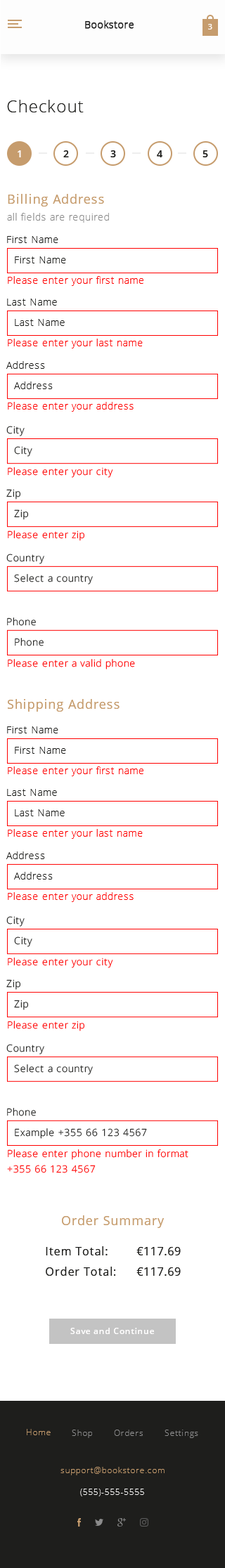
<style>
.page{position:relative;width:225px;height:1568px;background:#ffffff}
.page>*{position:absolute;margin:0}
.t1{font:16.9px "OpenSans-Light";letter-spacing:0.05em;color:#1e1e1c}
.t2{font:9.8px "OpenSans-Semibold";letter-spacing:0.05em;color:#fefcfc}
.t3{font:9.8px "OpenSans-Semibold";letter-spacing:0.05em;color:#1e1e1c}
.t4{font:12.6px "OpenSans";letter-spacing:0.05em;color:#c69c6d}
.t5{font:9.8px "OpenSans-Light";letter-spacing:0.05em;color:#8c8c8c}
.t6{font:9.8px "OpenSans-Light";letter-spacing:0.05em;color:#1e1e1c}
.t7{font:9.8px "OpenSans-Light";letter-spacing:0.05em;color:#ff0000}
.t8{font:9.9px "OpenSans-Light";letter-spacing:0.05em}
.t9{font:9.9px "OpenSans-Light";letter-spacing:0.05em;color:#1e1e1c}
.t10{font:9.9px "OpenSans-Light";letter-spacing:0.05em;color:#ff0000}
.t11{font:9.8px/15.5px "OpenSans-Light";letter-spacing:0.05em;color:#ff0000}
.t12{font:11.2px "OpenSans";letter-spacing:0.05em;color:#1e1e1c}
.t13{font:8.4px "OpenSans-Semibold";letter-spacing:0.05em;color:#fffefe}
</style>
<div class="page">
<p class="t1" style="left:7px;top:100px;width:77px;height:12px">Checkout</p>
<p class="t2" style="left:18px;top:150px;width:3px;height:7px">1</p>
<p class="t3" style="left:63px;top:150px;width:6px;height:7px">2</p>
<p class="t3" style="left:110px;top:150px;width:6px;height:7px">3</p>
<p class="t3" style="left:157px;top:150px;width:5px;height:7px">4</p>
<p class="t3" style="left:202px;top:150px;width:6px;height:7px">5</p>
<p class="t4" style="left:8px;top:194px;width:96px;height:13px">Billing Address</p>
<p class="t5" style="left:7px;top:213px;width:102px;height:10px">all fields are required</p>
<p class="t6" style="left:7px;top:236px;width:51px;height:7px">First Name</p>
<p class="t6" style="left:15px;top:256px;width:51px;height:7px">First Name</p>
<p class="t7" style="left:8px;top:276px;width:135px;height:10px">Please enter your first name</p>
<p class="t6" style="left:7px;top:299px;width:50px;height:7px">Last Name</p>
<p class="t6" style="left:15px;top:319px;width:50px;height:7px">Last Name</p>
<p class="t7" style="left:8px;top:339px;width:135px;height:9px">Please enter your last name</p>
<p class="t6" style="left:6px;top:361px;width:39px;height:8px">Address</p>
<p class="t6" style="left:14px;top:381px;width:39px;height:8px">Address</p>
<p class="t7" style="left:8px;top:402px;width:125px;height:10px">Please enter your address</p>
<p class="t8" style="left:6px;top:426px;width:19px;height:10px">City</p>
<p class="t8" style="left:14px;top:446px;width:18px;height:11px">City</p>
<p class="t8" style="left:8px;top:467px;width:105px;height:11px">Please enter your city</p>
<p class="t9" style="left:6px;top:489px;width:14px;height:10px">Zip</p>
<p class="t9" style="left:14px;top:509px;width:14px;height:11px">Zip</p>
<p class="t8" style="left:8px;top:530px;width:76px;height:11px">Please enter zip</p>
<p class="t8" style="left:6px;top:554px;width:38px;height:10px">Country</p>
<p class="t8" style="left:14px;top:574px;width:79px;height:10px">Select a country</p>
<p class="t8" style="left:7px;top:618px;width:29px;height:8px">Phone</p>
<p class="t8" style="left:15px;top:638px;width:29px;height:8px">Phone</p>
<p class="t10" style="left:8px;top:659px;width:127px;height:10px">Please enter a valid phone number</p>
<p class="t4" style="left:8px;top:699px;width:111px;height:13px">Shipping Address</p>
<p class="t6" style="left:7px;top:726px;width:51px;height:7px">First Name</p>
<p class="t6" style="left:15px;top:747px;width:51px;height:7px">First Name</p>
<p class="t7" style="left:8px;top:766px;width:135px;height:10px">Please enter your first name</p>
<p class="t6" style="left:7px;top:789px;width:50px;height:7px">Last Name</p>
<p class="t6" style="left:15px;top:809px;width:50px;height:7px">Last Name</p>
<p class="t7" style="left:8px;top:829px;width:135px;height:10px">Please enter your last name</p>
<p class="t6" style="left:6px;top:851px;width:39px;height:8px">Address</p>
<p class="t6" style="left:14px;top:872px;width:39px;height:8px">Address</p>
<p class="t7" style="left:8px;top:892px;width:125px;height:10px">Please enter your address</p>
<p class="t8" style="left:6px;top:916px;width:19px;height:11px">City</p>
<p class="t8" style="left:14px;top:936px;width:18px;height:11px">City</p>
<p class="t8" style="left:8px;top:958px;width:105px;height:10px">Please enter your city</p>
<p class="t9" style="left:6px;top:979px;width:14px;height:11px">Zip</p>
<p class="t9" style="left:14px;top:1000px;width:14px;height:10px">Zip</p>
<p class="t8" style="left:8px;top:1021px;width:76px;height:10px">Please enter zip</p>
<p class="t8" style="left:6px;top:1044px;width:38px;height:10px">Country</p>
<p class="t8" style="left:14px;top:1064px;width:79px;height:11px">Select a country</p>
<p class="t8" style="left:7px;top:1108px;width:29px;height:8px">Phone</p>
<p class="t9" style="left:15px;top:1128px;width:132px;height:11px">Example +355 66 123 4567</p>
<p class="t11" style="left:7px;top:1149px;width:181px;height:24px">Please enter phone number in format <br>+355 66 123 4567</p>
<p class="t4" style="left:62px;top:1215px;width:102px;height:13px">Order Summary</p>
<p class="t12" style="left:46px;top:1246px;width:61px;height:9px">Item Total:</p>
<p class="t12" style="left:136px;top:1247px;width:45px;height:8px">€117.69</p>
<p class="t12" style="left:46px;top:1267px;width:69px;height:9px">Order Total:</p>
<p class="t12" style="left:136px;top:1267px;width:45px;height:9px">€117.69</p>
<p class="t13" style="left:70px;top:1328px;width:84px;height:6px">Save and Continue</p>
</div>
